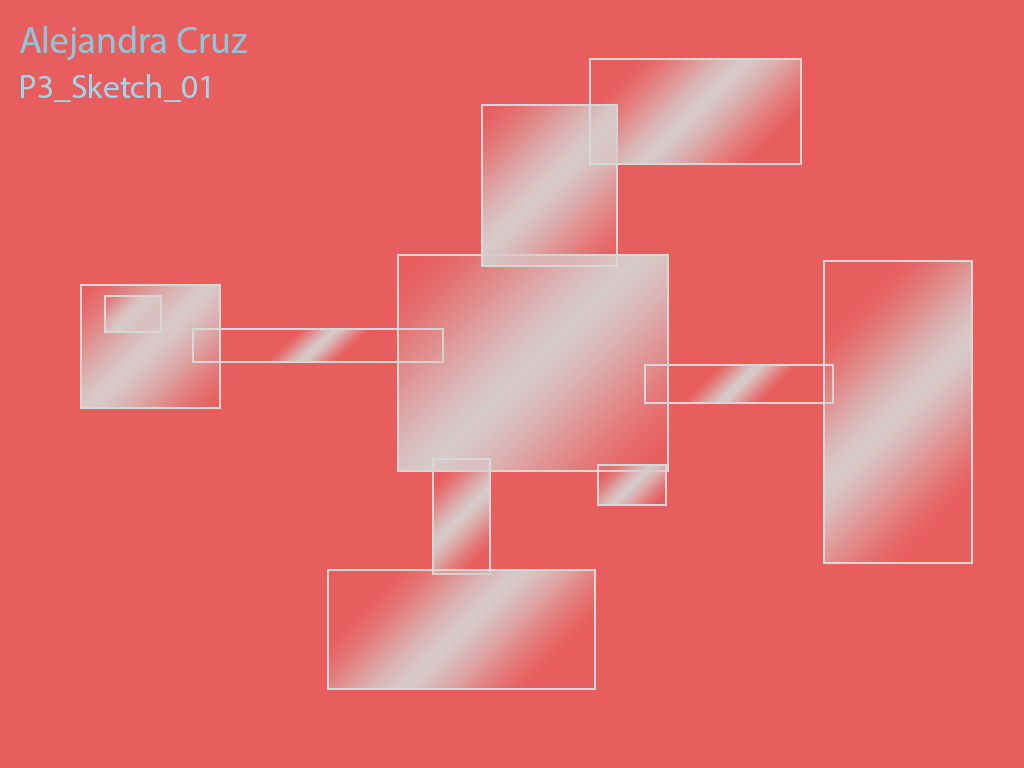
<style>
.page{position:relative;width:1024px;height:768px;background:#e85e5e}
.page>*{position:absolute;margin:0}
.t1{font:37.5px "MyriadPro-Regular";color:#89c8dc}
.t2{font:33.3px "MyriadPro-Regular";color:#9ed6e8}
</style>
<div class="page">
<p class="t1" style="left:20px;top:26px;width:227px;height:34px">Alejandra Cruz</p>
<p class="t2" style="left:21px;top:74px;width:188px;height:28px">P3_Sketch_01</p>
</div>
